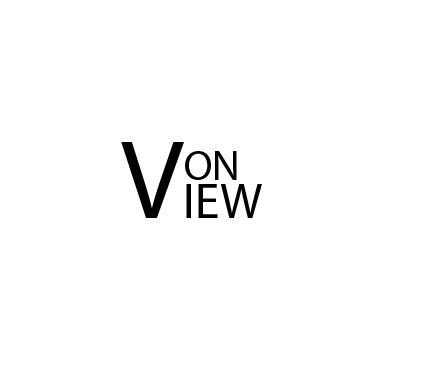
<style>
.page{position:relative;width:430px;height:391px;background:#ffffff}
.page>*{position:absolute;margin:0}
.t1{font:50px "MyriadPro-Regular";color:#000000}
.t2{font:112.5px "MyriadPro-Regular";color:#000000}
.t3{font:41.7px "MyriadPro-Regular";color:#000000}
</style>
<div class="page">
<p class="t1" style="left:121px;top:142px;width:141px;height:76px"><span class="t2">V</span>IEW</p>
<p class="t3" style="left:185px;top:151px;width:52px;height:29px">ON</p>
</div>
